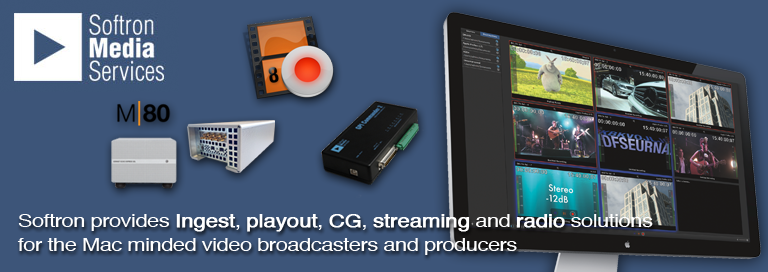
<style>
.page{position:relative;width:768px;height:272px;background:#3d5579}
.page>*{position:absolute;margin:0}
.t1{font:17.6px/24px "Helvetica";letter-spacing:-0.025em;color:#ffffff;scale:1.25 1}
.t2{font:17.6px/24px "Helvetica";letter-spacing:-0.025em;color:#ffffff;font-weight:bold;scale:1.25 1}
</style>
<div class="page">
<p class="t1" style="left:17px;top:214px;width:636px;height:41px">Softron provides <span class="t2">Ingest</span>, <span class="t2">playout</span>, <span class="t2">CG</span>, <span class="t2">streaming</span> and <span class="t2">radio</span> solutions <br>for the Mac minded video broadcasters and producers</p>
</div>
